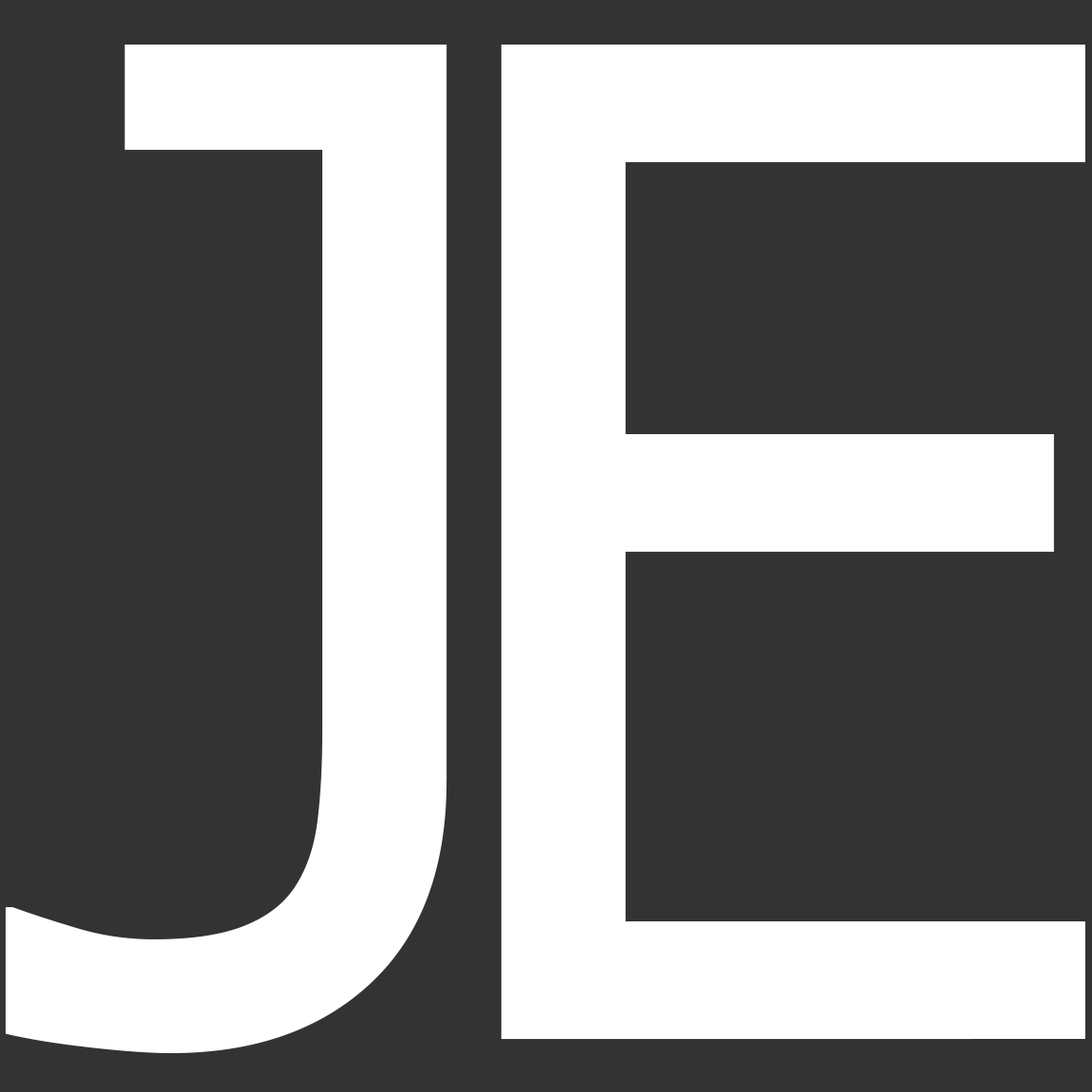
<style>
.page{position:relative;width:1092px;height:1092px;background:#333333}
.page>*{position:absolute;margin:0}
.t1{font:1368.1px "Tahoma";letter-spacing:-0.1em;color:#fefefe;scale:0.94 1}
</style>
<div class="page">
<p class="t1" style="left:5px;top:45px;width:1080px;height:1008px">JE</p>
</div>
